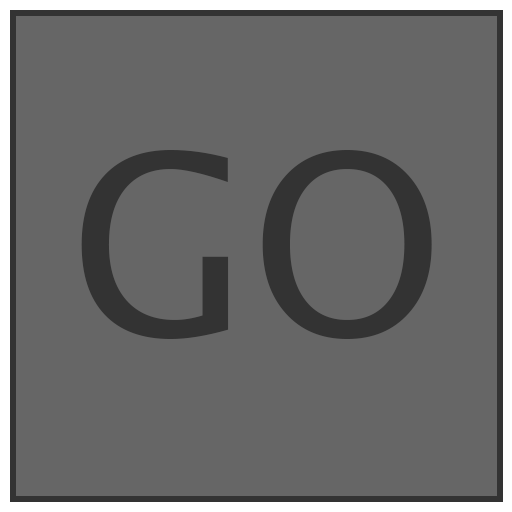
<style>
.page{position:relative;width:512px;height:512px;background:#666666}
.page>*{position:absolute;margin:0}
.t1{font:250px "LucidaSansUnicode";color:#333333}
</style>
<div class="page">
<p class="t1" style="left:81px;top:150px;width:351px;height:189px">GO</p>
</div>
